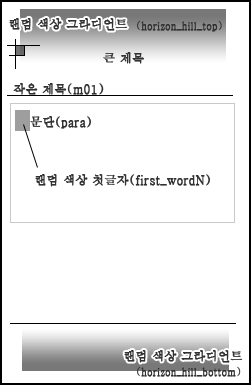
<style>
.page{position:relative;width:251px;height:385px;background:#ffffff}
.page>*{position:absolute;margin:0}
.t1{font:12px "Haansoft-Batang";color:#313131;font-weight:bold}
.t2{font:10px "Haansoft-Batang";color:#313131;font-weight:bold}
</style>
<div class="page">
<p class="t1" style="left:9px;top:18px;width:119px;height:13px">랜덤 색상 그라디언트</p>
<p class="t2" style="left:137px;top:20px;width:85px;height:12px">(horizon_hill_top)</p>
<p class="t1" style="left:103px;top:52px;width:41px;height:12px">큰 제목</p>
<p class="t1" style="left:13px;top:83px;width:91px;height:12px">작은 제목(m01)</p>
<p class="t1" style="left:30px;top:116px;width:61px;height:13px">문단(para)</p>
<p class="t1" style="left:35px;top:174px;width:175px;height:13px">랜덤 색상 첫글자(first_wordN)</p>
<p class="t1" style="left:124px;top:350px;width:119px;height:13px">랜덤 색상 그라디언트</p>
<p class="t2" style="left:137px;top:366px;width:104px;height:11px">(horizon_hill_bottom)</p>
</div>
